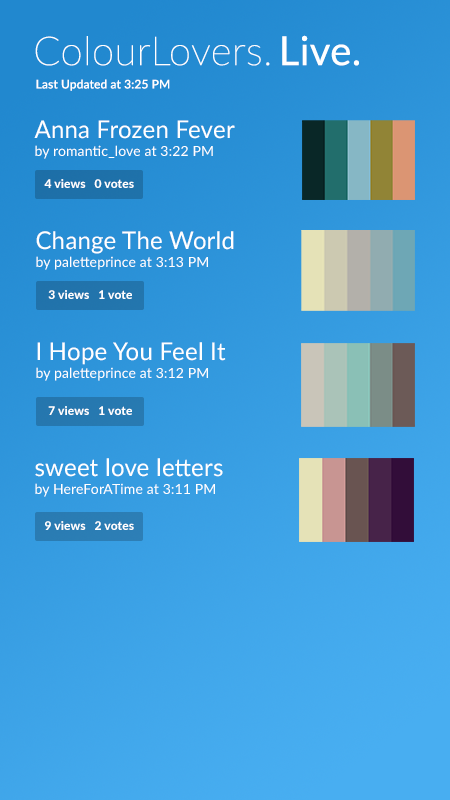
<style>
.page{position:relative;width:450px;height:800px}
.page>*{position:absolute;margin:0}
.t1{font:40px "Lato-Thin";letter-spacing:0.01em;color:#ffffff}
.t2{font:40px "Lato-Regular";letter-spacing:0.01em;color:#ffffff}
.t3{font:12px "Lato-Medium";letter-spacing:0.01em;color:#ffffff}
.t4{font:14px/18px "Lato-Regular";letter-spacing:0.01em;color:#ffffff}
.t5{font:24px/18px "Lato-Regular";letter-spacing:0.01em;color:#ffffff}
.t6{font:12px "Lato-Heavy";letter-spacing:0.01em;color:#ffffff}
</style>
<div class="page">
<p class="t1" style="left:35px;top:35px;width:324px;height:31px">ColourLovers. <span class="t2">Live.</span></p>
<p class="t3" style="left:36px;top:79px;width:134px;height:12px">Last Updated at 3:25 PM</p>
<p class="t4" style="left:34px;top:120px;width:201px;height:39px"><span class="t5">Anna Frozen Fever<br></span>by romantic_love at 3:22 PM</p>
<p class="t6" style="left:44px;top:179px;width:90px;height:9px">4 views   0 votes</p>
<p class="t4" style="left:36px;top:231px;width:198px;height:39px"><span class="t5">Change The World<br></span>by paletteprince at 3:13 PM</p>
<p class="t6" style="left:48px;top:290px;width:84px;height:9px">3 views   1 vote</p>
<p class="t4" style="left:36px;top:342px;width:190px;height:39px"><span class="t5">I Hope You Feel It<br></span>by paletteprince at 3:12 PM</p>
<p class="t6" style="left:48px;top:406px;width:84px;height:9px">7 views   1 vote</p>
<p class="t4" style="left:35px;top:458px;width:188px;height:39px"><span class="t5">sweet love letters<br></span>by HereForATime at 3:11 PM</p>
<p class="t6" style="left:45px;top:521px;width:89px;height:9px">9 views   2 votes</p>
</div>
